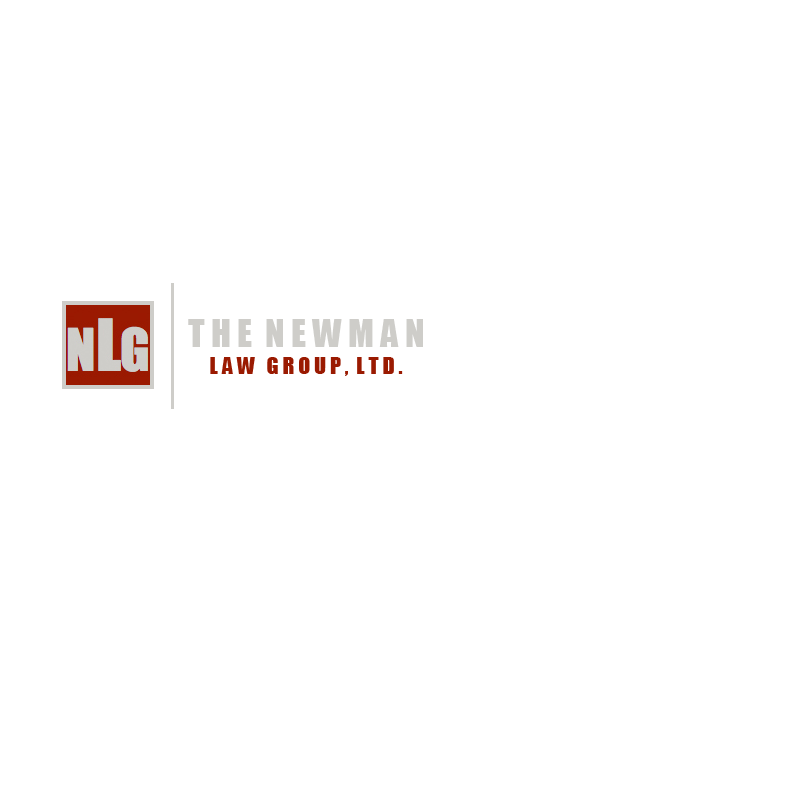
<style>
.page{position:relative;width:800px;height:800px;background:#ffffff}
.page>*{position:absolute;margin:0}
.t1{font:22px "Impact";color:#9a1a01}
.t2{font:36px "Impact";color:#cecdc9}
</style>
<div class="page">
<p class="t1" style="left:188px;top:319px;width:235px;height:57px;text-align:center"><span class="t2">T H E  N E W M A N<br></span>L A W   G R O U P ,  L T D .</p>
</div>
